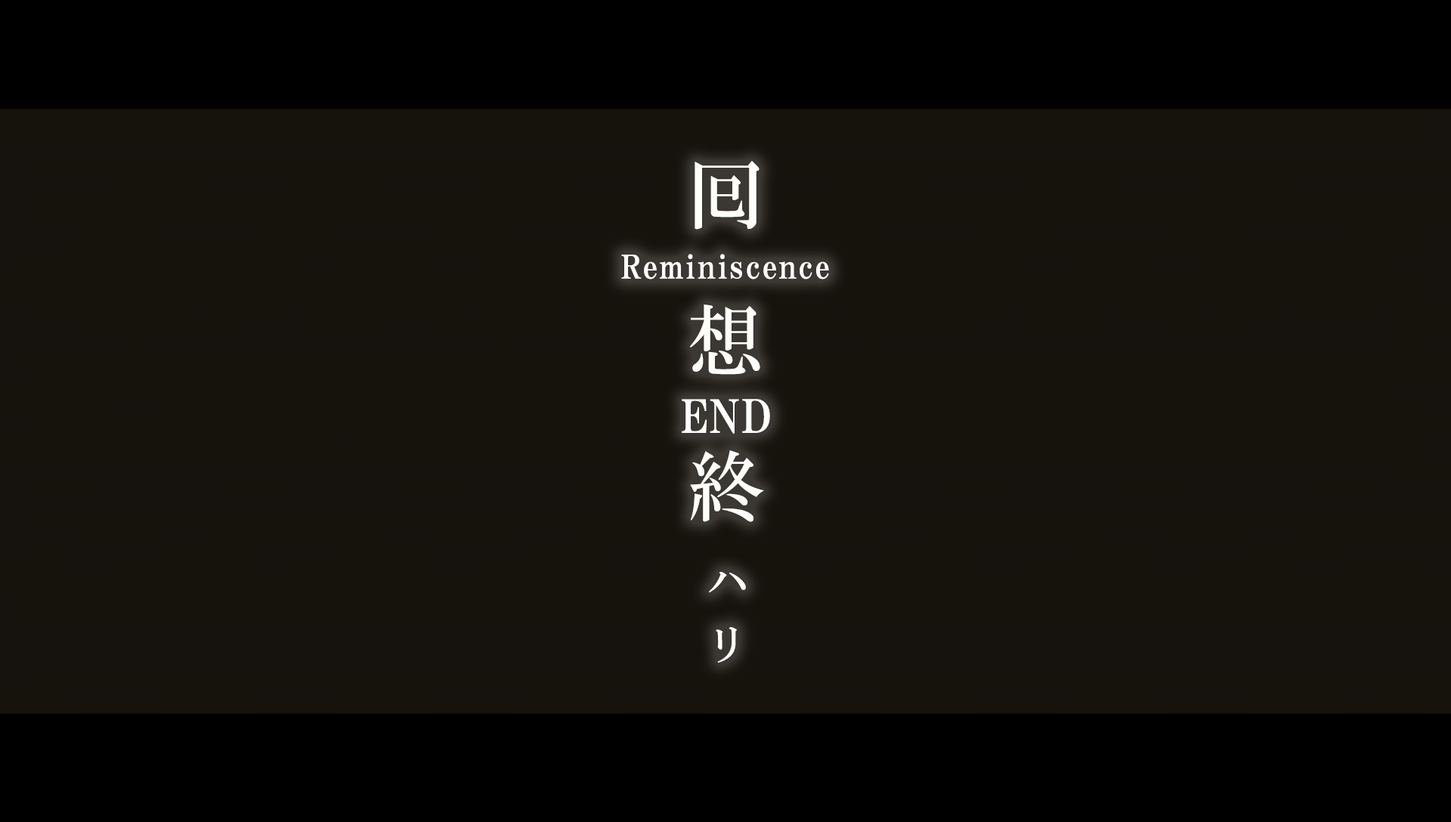
<style>
.page{position:relative;width:1451px;height:822px;background:#16120c}
.page>*{position:absolute;margin:0}
.t1{font:77.1px/145.8px "HGMinchoB";letter-spacing:0.59em;color:#fdfdfa}
.t2{font:32.2px "HGPMinchoE";letter-spacing:0.05em;color:#ffffff}
.t3{font:45.3px "HGPMinchoE";letter-spacing:0.025em;color:#ffffff}
.t4{font:40.8px/62.7px "HGMinchoB";letter-spacing:0.35em;color:#fdfdfa}
</style>
<div class="page">
<p class="t1" style="left:690px;top:161px;width:74px;height:361px">囘<br>想<br>終</p>
<p class="t2" style="left:621px;top:254px;width:208px;height:26px">Reminiscence</p>
<p class="t3" style="left:681px;top:399px;width:89px;height:35px">END</p>
<p class="t4" style="left:709px;top:572px;width:37px;height:91px">ハ<br>リ</p>
</div>
